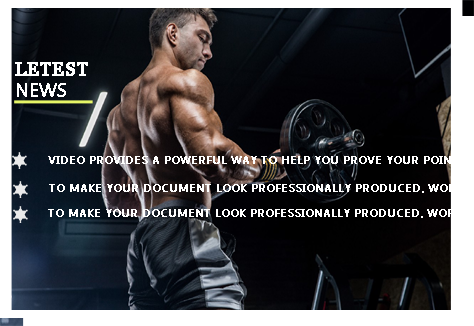
<style>
.page{position:relative;width:474px;height:326px}
.page>*{position:absolute;margin:0}
.t1{font:18px "Georgia";color:#ffffff;text-transform:uppercase;font-weight:bold}
.t2{font:18px "Ebrima";color:#ffffff;text-transform:uppercase;font-weight:bold}
.t3{font:11px "Ebrima";color:#ffffff;text-transform:uppercase;font-weight:bold}
</style>
<div class="page">
<p class="t1" style="left:15px;top:62px;width:73px;height:35px">letest <br><span class="t2">news</span></p>
<p class="t3" style="left:48px;top:156px;width:414px;height:8px">Video provides a powerful way to help you prove your point.</p>
<p class="t3" style="left:49px;top:184px;width:415px;height:9px">To make your document look professionally produced, Word</p>
</div>
